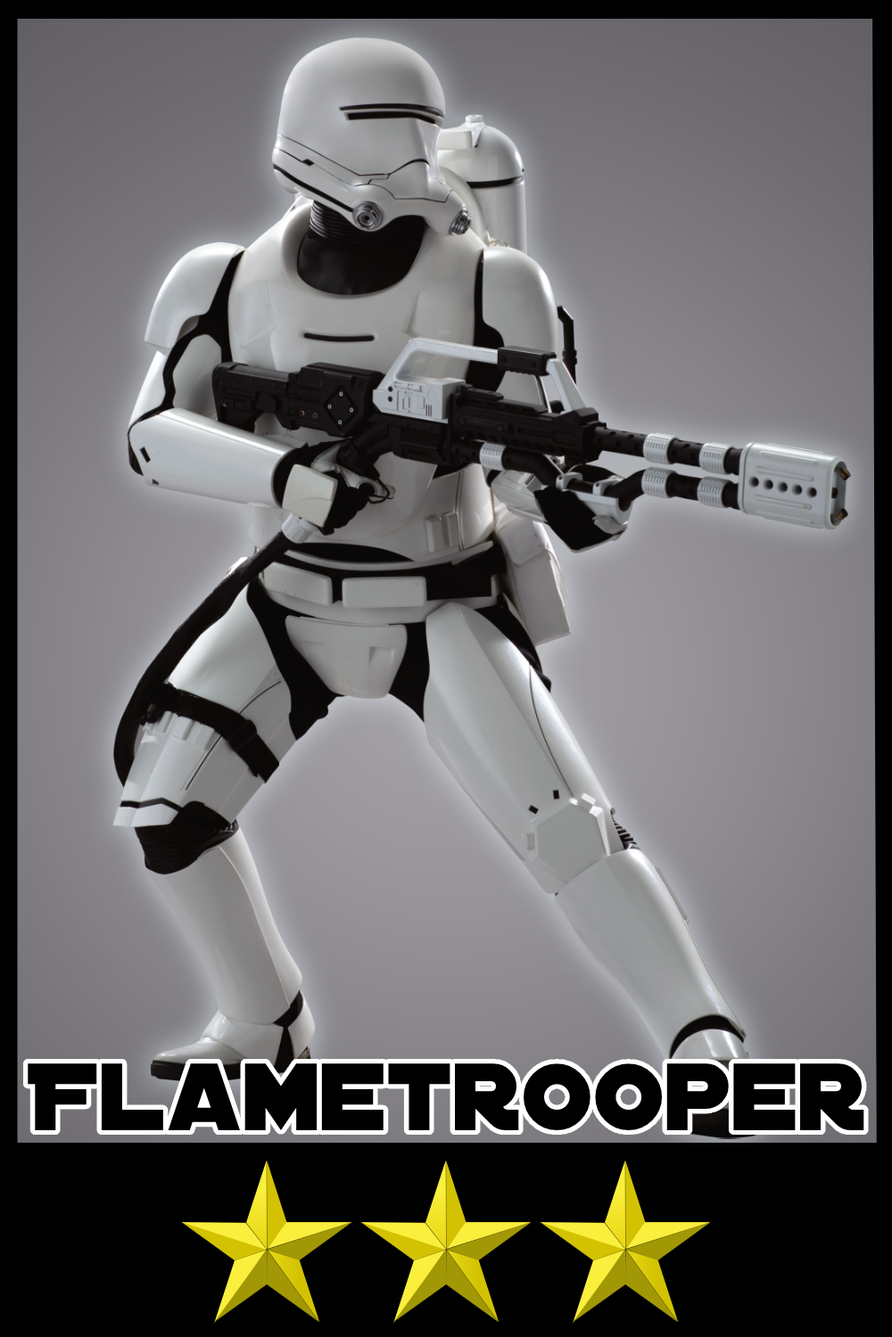
<style>
.page{position:relative;width:892px;height:1337px}
.page>*{position:absolute;margin:0}
.t1{font:102.4px "DistantGalaxy";color:#000000}
</style>
<div class="page">
<p class="t1" style="left:28px;top:1064px;width:836px;height:67px">Flametrooper</p>
</div>
